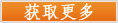
<style>
.page{position:relative;width:118px;height:23px}
.page>*{position:absolute;margin:0}
.t1{font:18px "·ÂËÎ";color:#ffffff;font-weight:bold}
</style>
<div class="page">
<p class="t1" style="left:24px;top:3px;width:69px;height:18px">获取更多</p>
</div>
